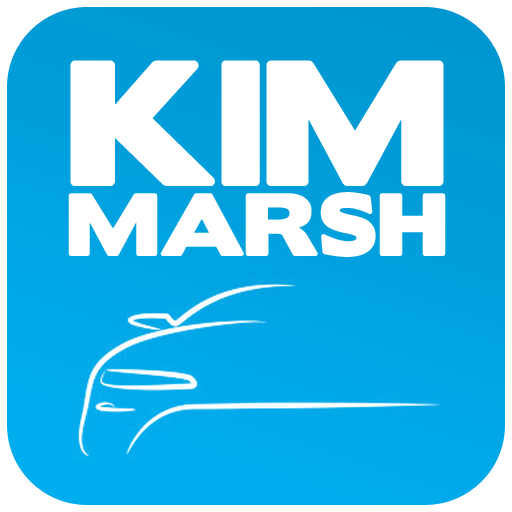
<style>
.page{position:relative;width:512px;height:512px;background:#ffffff}
.page>*{position:absolute;margin:0}
.t1{font:80px/70px "BorisBlackBloxx";color:#ffffff}
.t2{font:160px/160px "BorisBlackBloxx";color:#ffffff}
</style>
<div class="page">
<p class="t1" style="left:68px;top:60px;width:378px;height:197px;text-align:center"><span class="t2">KIM<br></span>MARSH</p>
</div>
